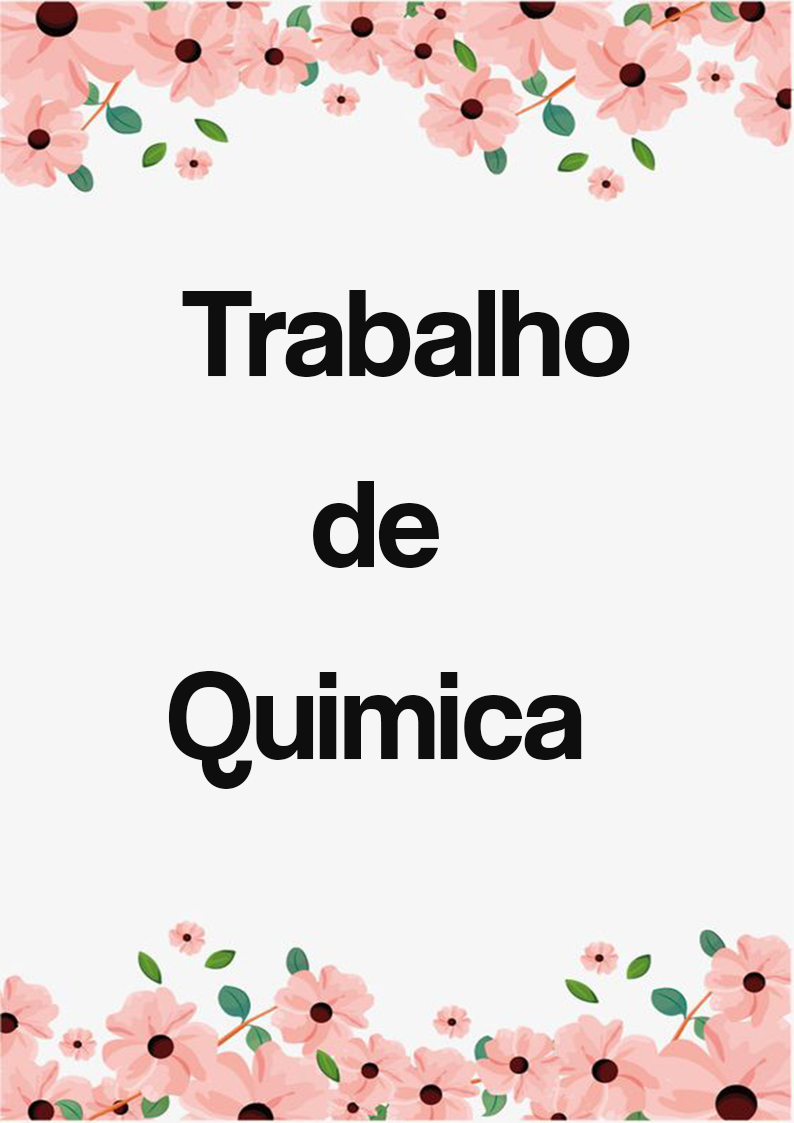
<style>
.page{position:relative;width:794px;height:1123px;background:#f6f6f6}
.page>*{position:absolute;margin:0}
.t1{font:127.6px/191.6px "CoolveticaRg-Regular";color:#0e0e0e}
.t2{font:127.6px/337px "CoolveticaRg-Regular";color:#0e0e0e}
</style>
<div class="page">
<p class="t1" style="left:168px;top:290px;width:462px;height:499px;text-align:center"><span class="t2">  </span>Trabalho<br>de<br>Quimica</p>
</div>
